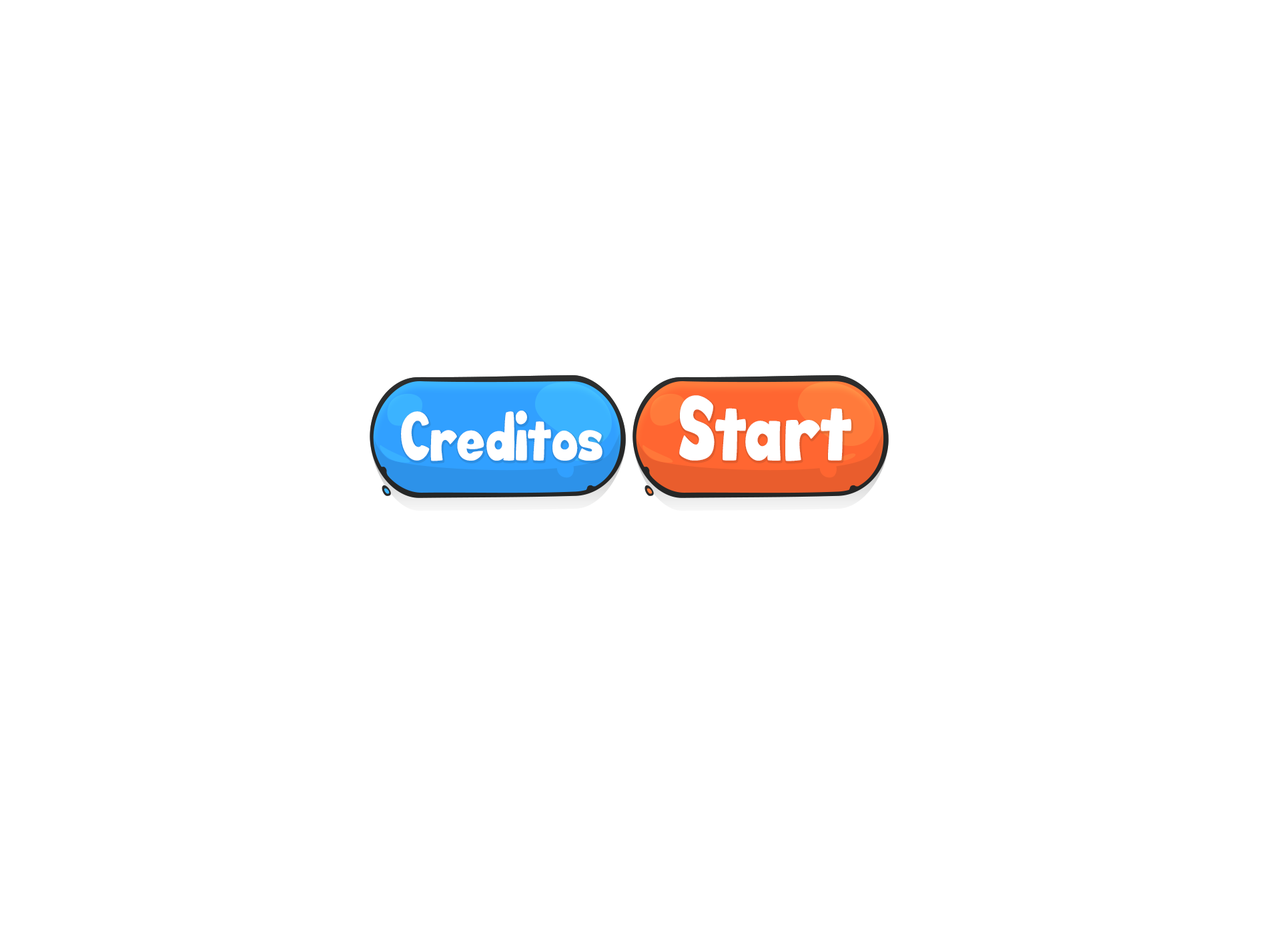
<style>
.page{position:relative;width:1261px;height:946px;background:#ffffff}
.page>*{position:absolute;margin:0}
.t1{font:55.6px "Big_Bottom_Cartoon";letter-spacing:0.01em;color:#ffffff;scale:0.84 1}
.t2{font:41.7px "Big_Bottom_Cartoon";letter-spacing:0.01em;color:#ffffff;scale:0.84 1}
</style>
<div class="page">
<p class="t1" style="left:679px;top:395px;width:172px;height:66px">Start</p>
<p class="t2" style="left:401px;top:410px;width:202px;height:51px">Creditos</p>
</div>
